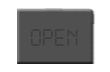
<style>
.page{position:relative;width:110px;height:72px;background:#ffffff}
.page>*{position:absolute;margin:0}
.t1{font:26px "DS-Digital";letter-spacing:-0.025em;color:#404040}
</style>
<div class="page">
<p class="t1" style="left:30px;top:29px;width:48px;height:17px">open</p>
</div>
